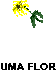
<style>
.page{position:relative;width:56px;height:70px;background:#ffffff}
.page>*{position:absolute;margin:0}
.t1{font:9.5px "Arial-BoldMT";color:#000000;scale:1.11 1}
</style>
<div class="page">
<p class="t1" style="left:1px;top:63px;width:55px;height:8px">UMA FLOR</p>
</div>
